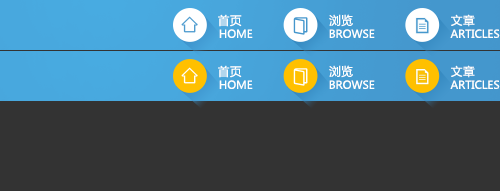
<style>
.page{position:relative;width:500px;height:191px;background:#333333}
.page>*{position:absolute;margin:0}
.t1{font:11.6px "MicrosoftYaHei";letter-spacing:0.05em;color:#fefffe;text-transform:uppercase}
.t2{font:10.9px "MicrosoftYaHei";color:#fefffe;text-transform:uppercase}
</style>
<div class="page">
<p class="t1" style="left:218px;top:14px;width:24px;height:13px">首页</p>
<p class="t1" style="left:329px;top:14px;width:24px;height:13px">浏览</p>
<p class="t1" style="left:451px;top:14px;width:24px;height:13px">文章</p>
<p class="t2" style="left:219px;top:29px;width:34px;height:9px">HOME</p>
<p class="t2" style="left:329px;top:29px;width:46px;height:9px">Browse</p>
<p class="t2" style="left:450px;top:29px;width:50px;height:9px">Articles</p>
<p class="t1" style="left:218px;top:65px;width:24px;height:13px">首页</p>
<p class="t1" style="left:329px;top:65px;width:24px;height:13px">浏览</p>
<p class="t1" style="left:451px;top:65px;width:24px;height:13px">文章</p>
<p class="t2" style="left:219px;top:80px;width:34px;height:9px">HOME</p>
<p class="t2" style="left:329px;top:80px;width:46px;height:9px">Browse</p>
<p class="t2" style="left:450px;top:80px;width:50px;height:9px">Articles</p>
</div>
